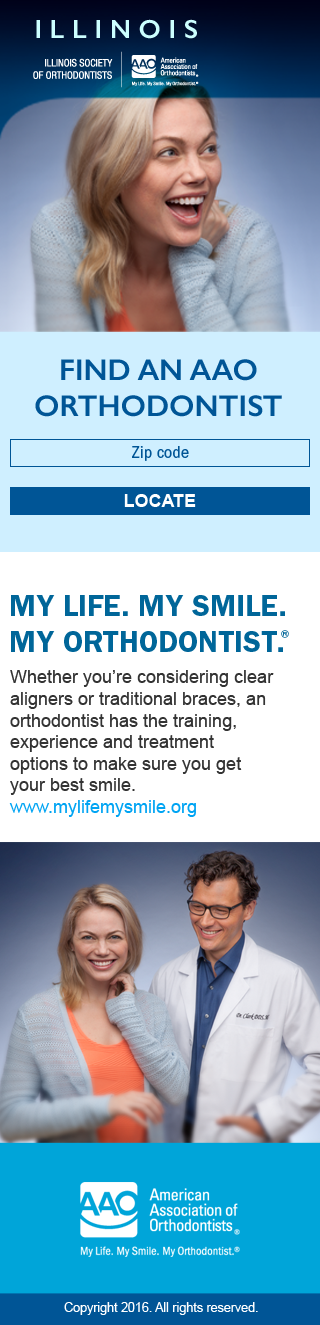
<style>
.page{position:relative;width:320px;height:1325px;background:#ffffff}
.page>*{position:absolute;margin:0}
.t1{font:26.2px "GillSans-SemiBold";letter-spacing:0.3em;color:#ccffff;text-transform:uppercase}
.t2{font:30px "GillSans-SemiBold";color:#005596;text-transform:uppercase}
.t3{font:18px "FranklinGothic-BookCond";color:#005596}
.t4{font:18px "Arial-BoldMT";color:#ffffff}
.t5{font:30px "FranklinGothic-Demi";color:#006699;text-transform:uppercase}
.t6{font:30px "FranklinGothic-Demi";letter-spacing:-0.15em;color:#006699;text-transform:uppercase}
.t7{font:18px "ArialMT";color:#333333}
.t8{font:18px "ArialMT";color:#00a4f3}
.t9{font:12.5px "ArialMT";color:#ffffff}
</style>
<div class="page">
<p class="t1" style="left:36px;top:19px;width:161px;height:20px">ILLINOIS</p>
<p class="t2" style="left:35px;top:359px;width:247px;height:58px;text-align:center">FIND AN AAO ORTHODONTIST</p>
<p class="t3" style="left:132px;top:446px;width:57px;height:15px">Zip code</p>
<p class="t4" style="left:124px;top:494px;width:72px;height:13px">LOCATE</p>
<p class="t5" style="left:11px;top:595px;width:278px;height:57px">MY LIFE. MY SMILE. <br>MY ORTHODONTIST<span class="t6">.</span>®</p>
<p class="t7" style="left:9px;top:670px;width:265px;height:147px">Whether you’re considering clear <br>aligners or traditional braces, an <br>orthodontist has the training, <br>experience and treatment <br>options to make sure you get <br>your best smile.<br><span class="t8">www.mylifemysmile.org</span></p>
<p class="t9" style="left:64px;top:1302px;width:194px;height:13px">Copyright 2016. All rights reserved.</p>
</div>
